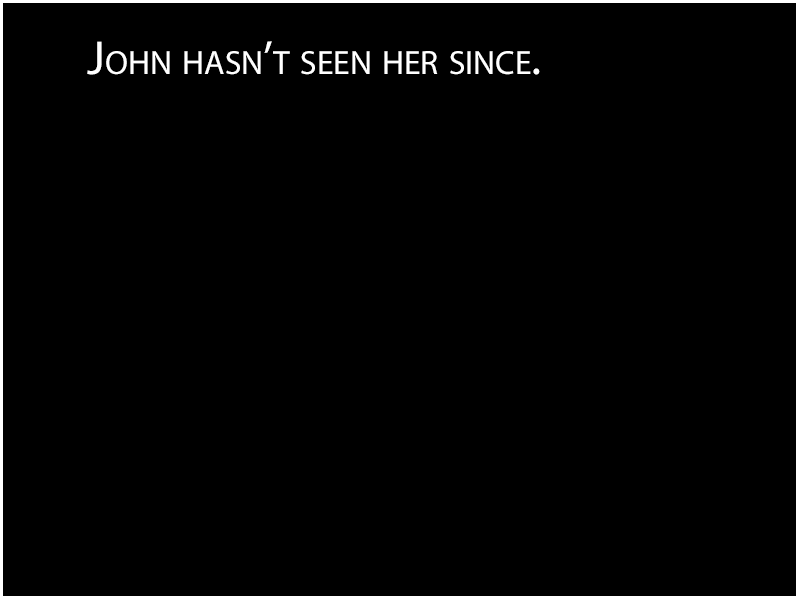
<style>
.page{position:relative;width:800px;height:600px;background:#000000}
.page>*{position:absolute;margin:0}
.t1{font:48px "MyriadPro-Regular";color:#ffffff;font-variant:small-caps}
</style>
<div class="page">
<p class="t1" style="left:87px;top:41px;width:453px;height:34px">John hasn’t seen her since.</p>
</div>
